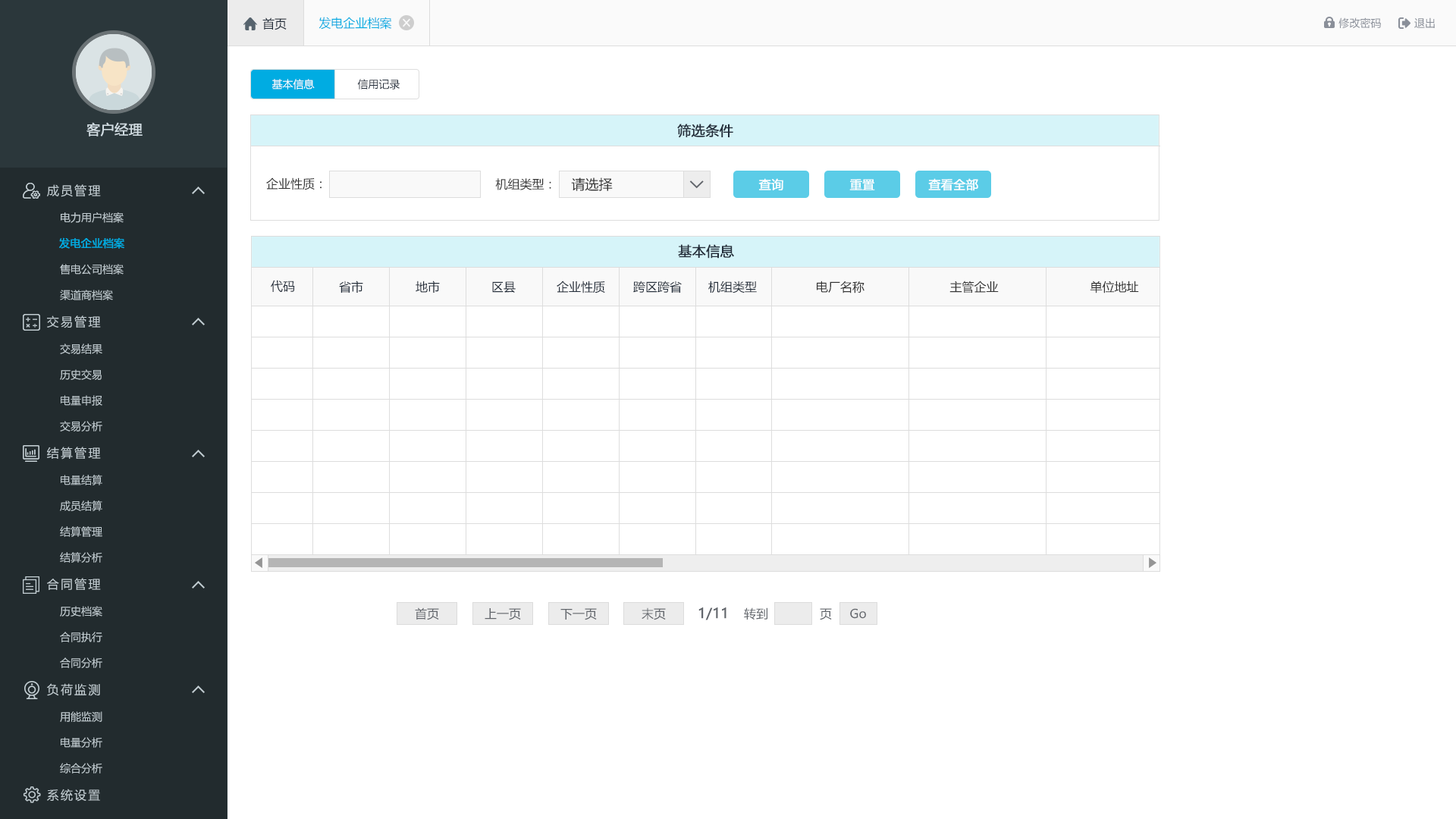
<style>
.page{position:relative;width:1456px;height:819px;background:#ffffff}
.page>*{position:absolute;margin:0}
.t1{font:12.1px "MicrosoftYaHei";color:#242e3b}
.t2{font:12.1px "MicrosoftYaHei";color:#00ace2}
.t3{font:10.6px "MicrosoftYaHei";color:#8a8f99}
.t4{font:10.6px "MicrosoftYaHei";color:#ffffff}
.t5{font:10.6px "MicrosoftYaHei";color:#242e3b}
.t6{font:13.6px "MicrosoftYaHei";color:#d1dce2;font-weight:bold}
.t7{font:13.6px "MicrosoftYaHei";color:#242e3b;font-weight:bold}
.t8{font:12.1px "MicrosoftYaHei";letter-spacing:0.14em;color:#c2cdd2}
.t9{font:12.1px "MicrosoftYaHei";color:#333333}
.t10{font:13.6px "MicrosoftYaHei";color:#333333}
.t11{font:12.1px "MicrosoftYaHei";color:#ffffff;font-weight:bold}
.t12{font:10.6px "MicrosoftYaHei";color:#c2cdd2}
.t13{font:10.6px "MicrosoftYaHei";color:#00ace2;font-weight:bold}
.t14{font:12.1px "MicrosoftYaHei";color:#61656b}
.t15{font:13.6px "MicrosoftYaHei";color:#61656b;font-weight:bold}
</style>
<div class="page">
<p class="t1" style="left:262px;top:17px;width:25px;height:13px">首页</p>
<p class="t2" style="left:318px;top:17px;width:74px;height:13px">发电企业档案</p>
<p class="t3" style="left:1338px;top:17px;width:43px;height:12px">修改密码</p>
<p class="t3" style="left:1414px;top:17px;width:21px;height:11px">退出</p>
<p class="t4" style="left:271px;top:79px;width:44px;height:10px">基本信息</p>
<p class="t5" style="left:357px;top:79px;width:43px;height:10px">信用记录</p>
<p class="t6" style="left:86px;top:122px;width:57px;height:14px">客户经理</p>
<p class="t7" style="left:677px;top:124px;width:56px;height:14px">筛选条件</p>
<p class="t8" style="left:47px;top:184px;width:54px;height:13px">成员管理</p>
<p class="t9" style="left:266px;top:177px;width:56px;height:13px">企业性质：</p>
<p class="t9" style="left:495px;top:178px;width:56px;height:12px">机组类型：</p>
<p class="t10" style="left:571px;top:177px;width:42px;height:14px">请选择</p>
<p class="t11" style="left:758px;top:178px;width:25px;height:12px">查询</p>
<p class="t11" style="left:849px;top:179px;width:26px;height:11px">重置</p>
<p class="t11" style="left:928px;top:178px;width:50px;height:13px">查看全部</p>
<p class="t12" style="left:61px;top:212px;width:63px;height:11px">电力用户档案</p>
<p class="t13" style="left:59px;top:237px;width:65px;height:12px">发电企业档案</p>
<p class="t7" style="left:678px;top:244px;width:56px;height:15px">基本信息</p>
<p class="t12" style="left:60px;top:264px;width:64px;height:11px">售电公司档案</p>
<p class="t1" style="left:271px;top:280px;width:24px;height:12px">代码</p>
<p class="t1" style="left:339px;top:281px;width:24px;height:12px">省市</p>
<p class="t1" style="left:416px;top:281px;width:24px;height:12px">地市</p>
<p class="t1" style="left:492px;top:281px;width:24px;height:12px">区县</p>
<p class="t1" style="left:557px;top:281px;width:48px;height:12px">企业性质</p>
<p class="t1" style="left:633px;top:281px;width:49px;height:12px">跨区跨省</p>
<p class="t1" style="left:708px;top:281px;width:49px;height:12px">机组类型</p>
<p class="t9" style="left:817px;top:281px;width:47px;height:12px">电厂名称</p>
<p class="t9" style="left:949px;top:281px;width:50px;height:12px">主管企业</p>
<p class="t9" style="left:1090px;top:281px;width:49px;height:12px">单位地址</p>
<p class="t12" style="left:60px;top:290px;width:53px;height:10px">渠道商档案</p>
<p class="t8" style="left:47px;top:315px;width:54px;height:13px">交易管理</p>
<p class="t12" style="left:60px;top:344px;width:42px;height:10px">交易结果</p>
<p class="t12" style="left:60px;top:369px;width:42px;height:11px">历史交易</p>
<p class="t12" style="left:61px;top:395px;width:41px;height:11px">电量申报</p>
<p class="t12" style="left:60px;top:421px;width:42px;height:10px">交易分析</p>
<p class="t8" style="left:47px;top:447px;width:54px;height:13px">结算管理</p>
<p class="t12" style="left:61px;top:475px;width:41px;height:10px">电量结算</p>
<p class="t12" style="left:60px;top:500px;width:42px;height:11px">成员结算</p>
<p class="t12" style="left:60px;top:526px;width:42px;height:11px">结算管理</p>
<p class="t12" style="left:60px;top:552px;width:42px;height:11px">结算分析</p>
<p class="t8" style="left:47px;top:578px;width:54px;height:12px">合同管理</p>
<p class="t12" style="left:60px;top:606px;width:42px;height:11px">历史档案</p>
<p class="t14" style="left:415px;top:607px;width:24px;height:13px">首页</p>
<p class="t14" style="left:485px;top:608px;width:36px;height:12px">上一页</p>
<p class="t14" style="left:560px;top:608px;width:37px;height:12px">下一页</p>
<p class="t14" style="left:642px;top:607px;width:24px;height:13px">末页</p>
<p class="t15" style="left:698px;top:607px;width:28px;height:13px">1/11</p>
<p class="t14" style="left:744px;top:607px;width:23px;height:13px">转到</p>
<p class="t14" style="left:820px;top:608px;width:12px;height:12px">页</p>
<p class="t14" style="left:850px;top:608px;width:16px;height:11px">Go</p>
<p class="t12" style="left:60px;top:632px;width:42px;height:10px">合同执行</p>
<p class="t12" style="left:60px;top:657px;width:42px;height:11px">合同分析</p>
<p class="t8" style="left:47px;top:683px;width:53px;height:13px">负荷监测</p>
<p class="t12" style="left:60px;top:711px;width:42px;height:11px">用能监测</p>
<p class="t12" style="left:61px;top:737px;width:41px;height:11px">电量分析</p>
<p class="t12" style="left:60px;top:763px;width:42px;height:10px">综合分析</p>
<p class="t8" style="left:47px;top:789px;width:53px;height:13px">系统设置</p>
</div>
